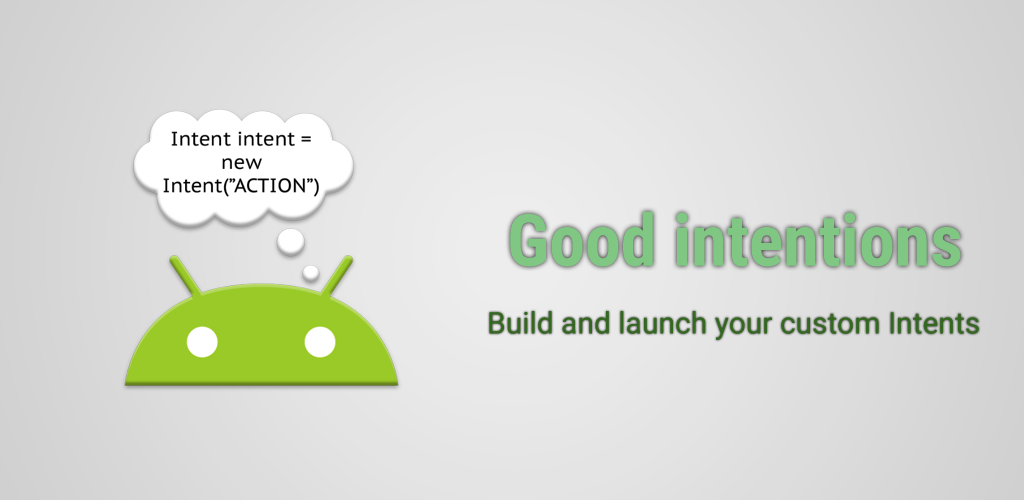
<style>
.page{position:relative;width:1024px;height:500px}
.page>*{position:absolute;margin:0}
.t1{font:72px "RobotoCondensed-Bold";color:#81c784}
.t2{font:30px "Roboto-Regular";color:#33691e}
</style>
<div class="page">
<p class="t1" style="left:510px;top:211px;width:451px;height:56px">Good intentions</p>
<p class="t2" style="left:489px;top:311px;width:490px;height:29px">Build and launch your custom Intents</p>
</div>
